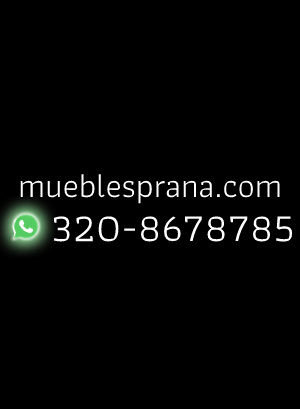
<style>
.page{position:relative;width:300px;height:409px;background:#000000}
.page>*{position:absolute;margin:0}
.t1{font:34px "Athiti-Regular";color:#ffffff}
.t2{font:41px "Athiti-Regular";color:#ffffff}
</style>
<div class="page">
<p class="t1" style="left:20px;top:174px;width:260px;height:30px">mueblesprana.com</p>
<p class="t2" style="left:53px;top:216px;width:240px;height:26px">320-8678785</p>
</div>
